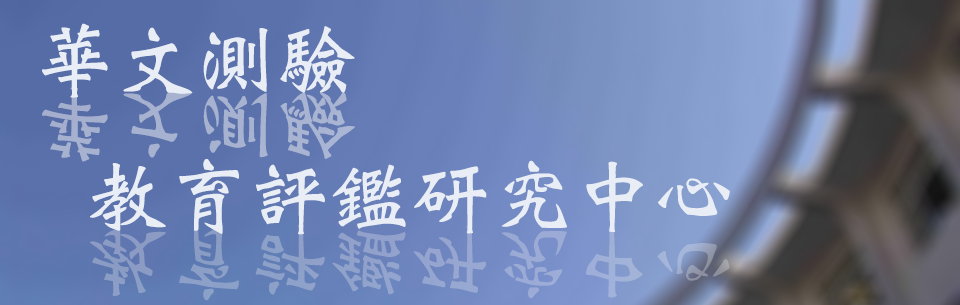
<style>
.page{position:relative;width:960px;height:305px}
.page>*{position:absolute;margin:0}
.t1{font:80.9px "Weibei-TC-Bold";color:#e9eef6}
.t2{font:81px "Weibei-TC-Bold";color:#a7b2d0}
.t3{font:81px "Weibei-TC-Bold";color:#91a2cb}
</style>
<div class="page">
<p class="t1" style="left:42px;top:23px;width:313px;height:75px">華文測驗</p>
<p class="t2" style="left:42px;top:87px;width:313px;height:75px">華文測驗</p>
<p class="t2" style="left:42px;top:87px;width:313px;height:75px">華文測驗</p>
<p class="t1" style="left:90px;top:159px;width:640px;height:76px">教育評鑑研究中心</p>
<p class="t3" style="left:90px;top:224px;width:640px;height:77px">教育評鑑研究中心</p>
</div>
